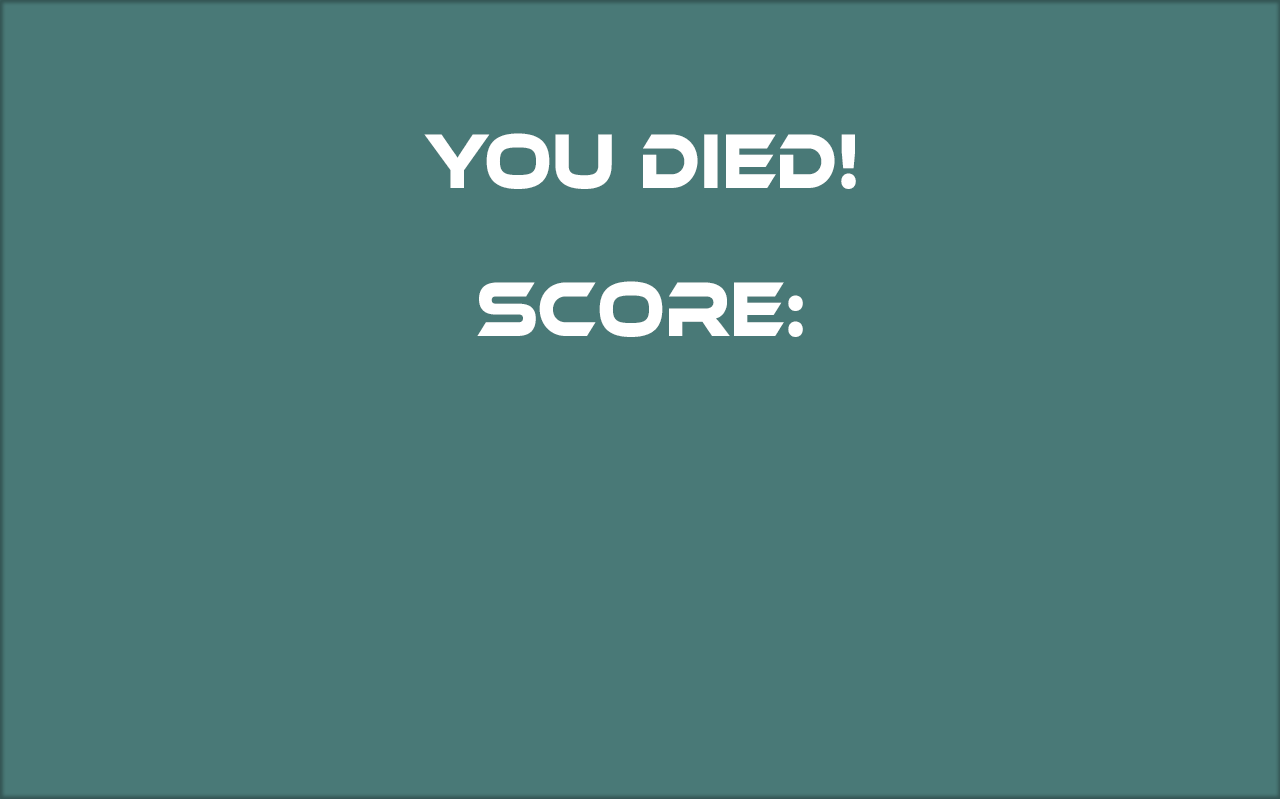
<style>
.page{position:relative;width:1280px;height:800px;background:#497977}
.page>*{position:absolute;margin:0}
.t1{font:80px "EthnocentricRg-Regular";color:#ffffff;scale:0.8 1}
</style>
<div class="page">
<p class="t1" style="left:424px;top:133px;width:432px;height:56px">YOU DIED!</p>
<p class="t1" style="left:477px;top:281px;width:326px;height:56px">SCORE:</p>
</div>
